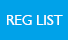
<style>
.page{position:relative;width:68px;height:40px;background:#00a2e9}
.page>*{position:absolute;margin:0}
.t1{font:13.9px "Humanist521BT-Roman";color:#fefefe;scale:1.04 1}
</style>
<div class="page">
<p class="t1" style="left:7px;top:15px;width:56px;height:10px">REG LIST</p>
</div>
